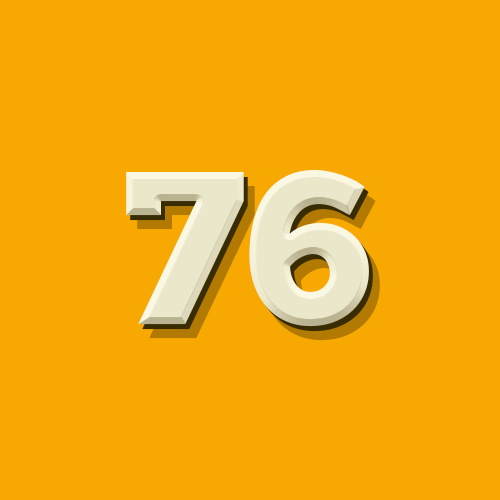
<style>
.page{position:relative;width:500px;height:500px;background:#f7a901}
.page>*{position:absolute;margin:0}
.t1{font:216.9px "ChunkFive";color:#ebe7ca}
</style>
<div class="page">
<p class="t1" style="left:126px;top:169px;width:243px;height:158px">76</p>
<p class="t1" style="left:126px;top:169px;width:243px;height:158px">76</p>
<p class="t1" style="left:126px;top:169px;width:243px;height:158px">76</p>
</div>
